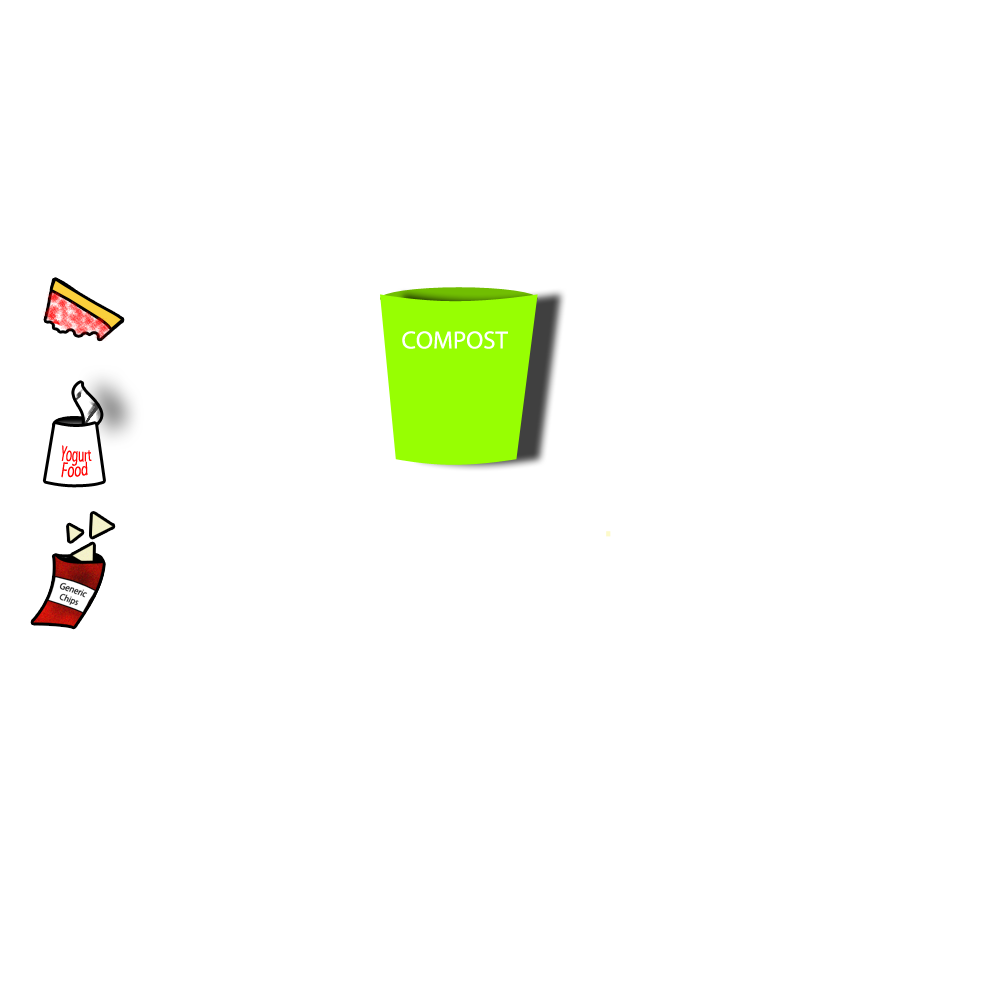
<style>
.page{position:relative;width:1000px;height:1000px;background:#ffffff}
.page>*{position:absolute;margin:0}
.t1{font:24.8px "MyriadPro-Regular";color:#ffffff}
.t2{font:11.3px/8.5px "MyriadPro-Regular";color:#ff0000}
</style>
<div class="page">
<p class="t1" style="left:402px;top:331px;width:106px;height:18px">COMPOST</p>
<p class="t2" style="left:61px;top:445px;width:31px;height:33px;text-align:center">Yogurt <br>Food</p>
</div>
